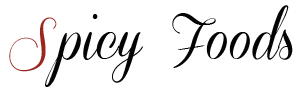
<style>
.page{position:relative;width:300px;height:90px;background:#ffffff}
.page>*{position:absolute;margin:0}
.t1{font:52.1px "ConeriaScriptDemo";color:#040404}
.t2{font:52.1px "ConeriaScriptDemo";color:#99261f}
</style>
<div class="page">
<p class="t1" style="left:45px;top:5px;width:248px;height:82px">picy Foods</p>
<p class="t2" style="left:9px;top:17px;width:48px;height:55px">S</p>
</div>
